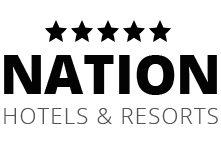
<style>
.page{position:relative;width:221px;height:147px;background:#ffffff}
.page>*{position:absolute;margin:0}
.t1{font:54px "OpenSans-Extrabold";letter-spacing:-0.005em;color:#030303}
.t2{font:22px "OpenSans-Light";letter-spacing:0.058em;color:#555555}
</style>
<div class="page">
<p class="t1" style="left:4px;top:55px;width:213px;height:40px">NATION</p>
<p class="t2" style="left:4px;top:108px;width:214px;height:16px">HOTELS &amp; RESORTS</p>
</div>
